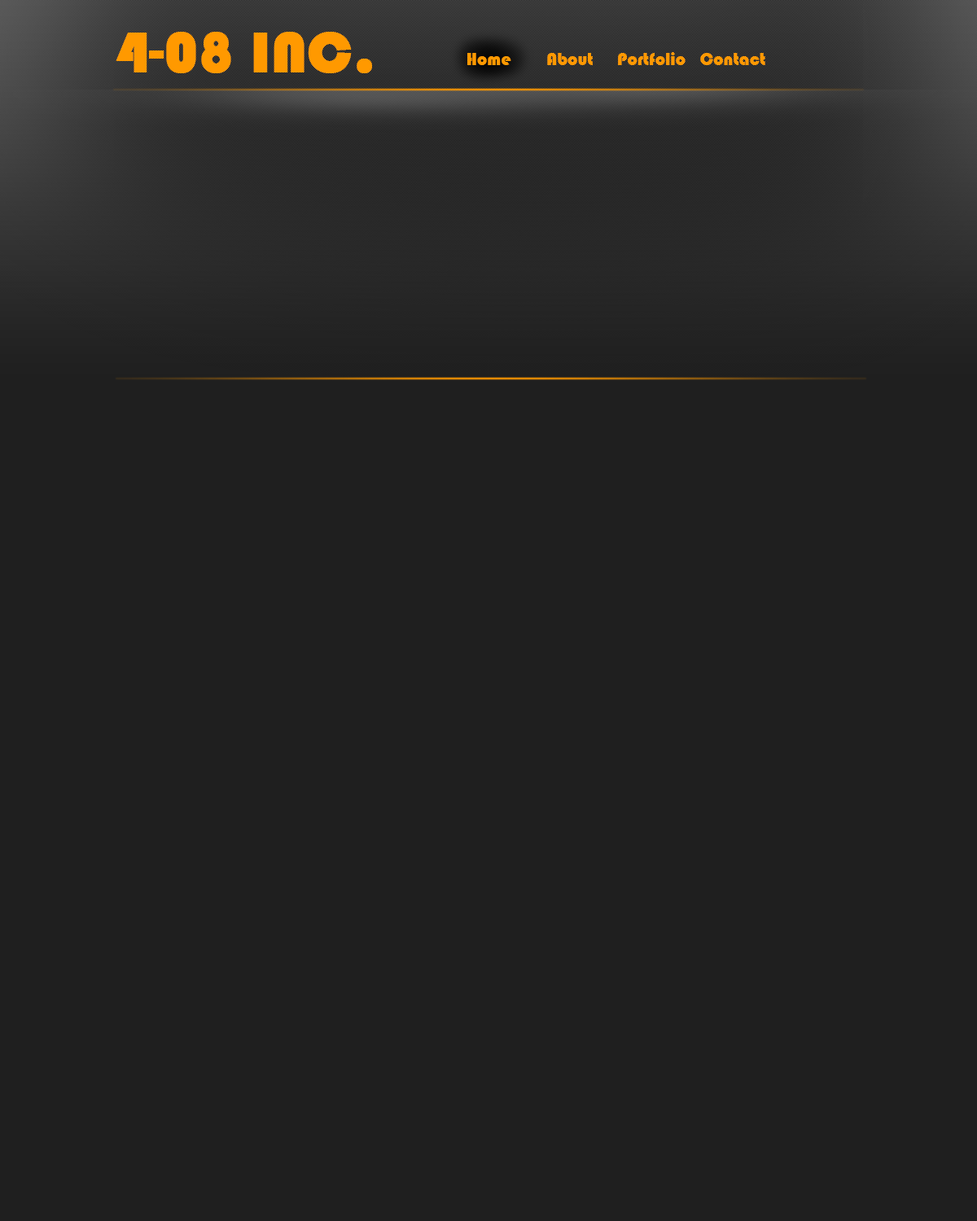
<style>
.page{position:relative;width:977px;height:1221px;background:#1f1f1f}
.page>*{position:absolute;margin:0}
.t1{font:58.6px "Bauhaus93";color:#ff9900;font-weight:bold}
.t2{font:58.5px "Bauhaus93";color:#ff9900;font-weight:bold}
.t3{font:17.9px "Bauhaus93";color:#ff9900}
</style>
<div class="page">
<p class="t1" style="left:116px;top:32px;width:256px;height:41px">4-08 INC.<br><span class="t2"><br><br>.</span></p>
<p class="t3" style="left:467px;top:53px;width:44px;height:12px">Home</p>
<p class="t3" style="left:547px;top:53px;width:46px;height:12px">About</p>
<p class="t3" style="left:618px;top:52px;width:67px;height:13px">Portfolio</p>
<p class="t3" style="left:700px;top:53px;width:65px;height:12px">Contact</p>
</div>
